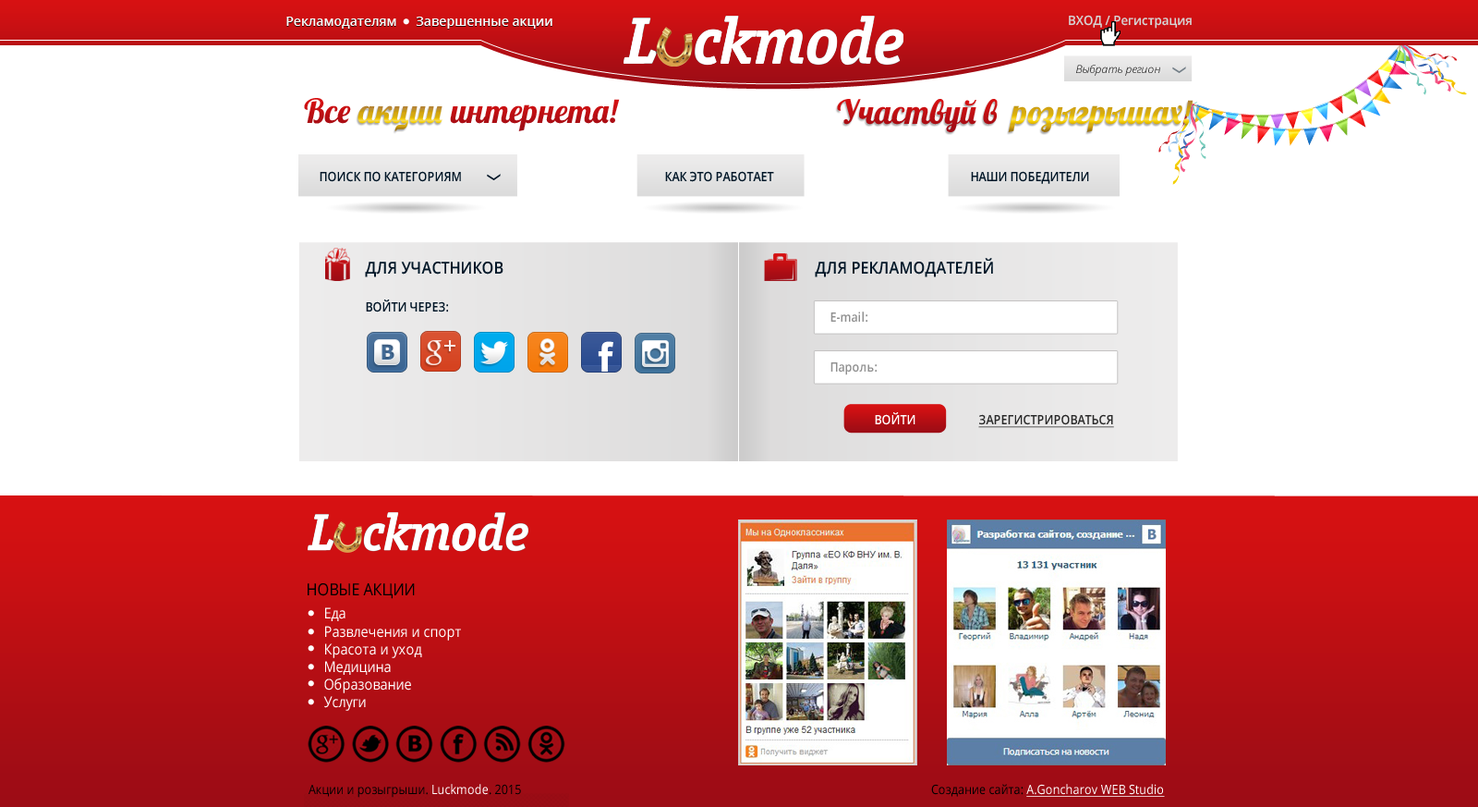
<style>
.page{position:relative;width:1478px;height:807px;background:#ffffff}
.page>*{position:absolute;margin:0}
.t1{font:12.9px "OpenSans-Semibold";color:#fdfffc}
.t2{font:12.9px "OpenSans-Semibold";color:#ffffff}
.t3{font:12.9px "OpenSans-Semibold";color:#d6d5d5;scale:0.95 1}
.t4{font:11.1px "OpenSansLight-Italic"}
.t5{font:33.3px "Lobster";color:#bc0f13}
.t6{font:33.3px "Lobster"}
.t7{font:12.9px "OpenSans-Semibold";color:#011627;text-transform:uppercase;scale:0.9 1}
.t8{font:16.6px "OpenSans-Semibold";color:#011627;text-transform:uppercase;scale:0.9 1}
.t9{font:12.9px "OpenSans-Semibold";color:#909090;scale:0.9 1}
.t10{font:12.9px "OpenSans-Semibold";color:#ffffff;text-transform:uppercase;scale:0.9 1}
.t11{font:12.9px "OpenSans-Semibold";color:#292929;text-transform:uppercase;text-decoration:underline;scale:0.9 1}
.t12{font:16.6px "OpenSans";color:#000000;text-transform:uppercase;scale:0.9 1}
.t13{font:14.8px "OpenSans";color:#ffffff;scale:0.9 1}
.t14{font:14.8px "OpenSans";color:#b2b1b1;text-transform:uppercase;scale:0.9 1}
.t15{font:12.9px "OpenSans";color:#000000;scale:0.9 1}
.t16{font:12.9px "OpenSans";color:#ffffff;scale:0.9 1}
.t17{font:12.9px "OpenSans";color:#ffffff;text-decoration:underline;scale:0.9 1}
</style>
<div class="page">
<p class="t1" style="left:286px;top:17px;width:110px;height:12px">Рекламодателям</p>
<p class="t2" style="left:416px;top:17px;width:137px;height:12px">Завершенные акции</p>
<p class="t3" style="left:1069px;top:15px;width:123px;height:14px">ВХОД / Регистрация</p>
<p class="t4" style="left:1076px;top:65px;width:84px;height:11px">Выбрать регион</p>
<p class="t5" style="left:304px;top:98px;width:316px;height:33px">Все              интернета!</p>
<p class="t5" style="left:837px;top:99px;width:161px;height:33px">Участвуй в</p>
<p class="t6" style="left:1008px;top:100px;width:186px;height:32px">розыгрышах!</p>
<p class="t6" style="left:358px;top:105px;width:85px;height:26px">акции</p>
<p class="t7" style="left:320px;top:171px;width:141px;height:11px">ПОИСК по категориям</p>
<p class="t7" style="left:665px;top:171px;width:109px;height:11px">Как это работает</p>
<p class="t7" style="left:971px;top:171px;width:118px;height:13px">наши победители</p>
<p class="t8" style="left:815px;top:258px;width:178px;height:19px">ДЛЯ рекламодателей</p>
<p class="t8" style="left:365px;top:261px;width:139px;height:16px">ДЛЯ УЧАСТНИКОВ</p>
<p class="t7" style="left:366px;top:299px;width:82px;height:13px">Войти через:</p>
<p class="t9" style="left:831px;top:311px;width:37px;height:11px">E-mail:</p>
<p class="t9" style="left:831px;top:362px;width:46px;height:13px">Пароль:</p>
<p class="t10" style="left:875px;top:412px;width:41px;height:13px">Войти</p>
<p class="t11" style="left:978px;top:414px;width:136px;height:14px">зарегистрироваться</p>
<p class="t12" style="left:308px;top:583px;width:107px;height:16px">НОВЫЕ АКЦИИ</p>
<p class="t13" style="left:323px;top:607px;width:138px;height:104px"><span class="t14"> <br><br></span>Еда<br>Развлечения и спорт<br>Красота и уход<br>Медицина<br>Образование<br>Услуги</p>
<p class="t15" style="left:309px;top:784px;width:212px;height:13px">Акции и розыгрыши. <span class="t16">Luckmode</span>. 2015</p>
<p class="t17" style="left:931px;top:784px;width:234px;height:12px"><span class="t15">Создание сайта: </span>A.Goncharov WEB Studio</p>
</div>
